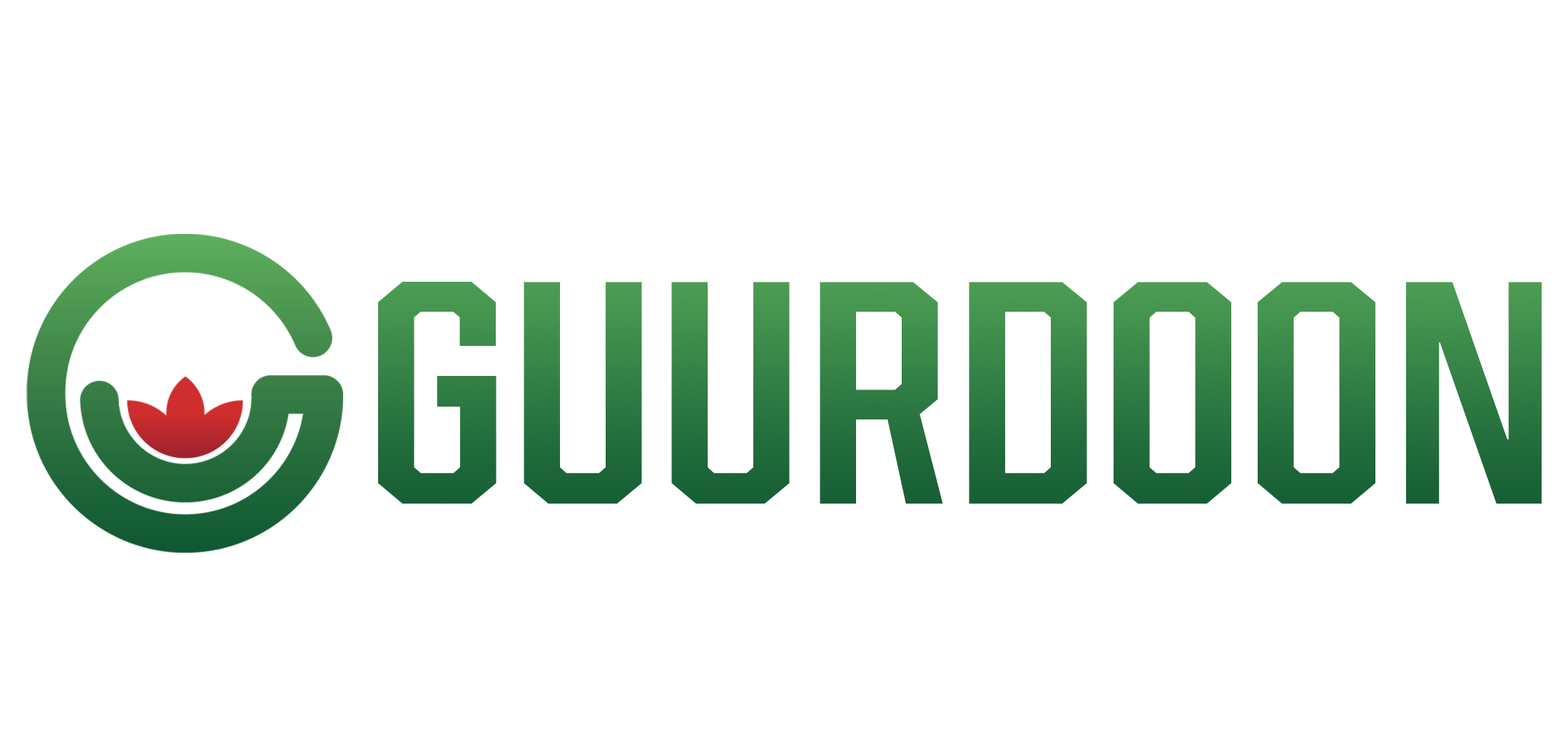
<style>
.page{position:relative;width:1568px;height:729px;background:#ffffff}
.page>*{position:absolute;margin:0}
.t1{font:276.9px "Redwing-Medium"}
</style>
<div class="page">
<p class="t1" style="left:378px;top:282px;width:1164px;height:222px">GUURDOON</p>
</div>
